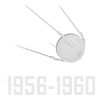
<style>
.page{position:relative;width:100px;height:100px;background:#ffffff}
.page>*{position:absolute;margin:0}
.t1{font:25.4px "AgencyFB-Bold";color:#e9e9e9}
</style>
<div class="page">
<p class="t1" style="left:7px;top:76px;width:89px;height:19px">1956-1960</p>
</div>
